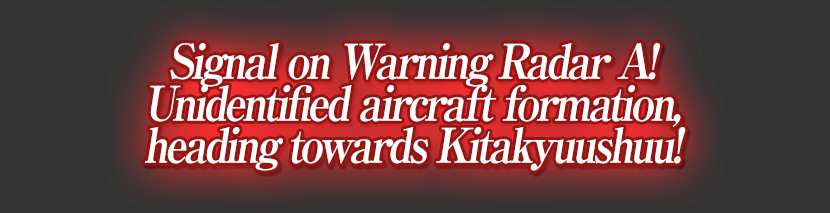
<style>
.page{position:relative;width:830px;height:213px;background:#333333}
.page>*{position:absolute;margin:0}
.t1{font:48px/42px "RyuminPro-ExBold";letter-spacing:-0.08em;color:#ffffff;font-style:italic;scale:0.9 1}
</style>
<div class="page">
<p class="t1" style="left:144px;top:43px;width:542px;height:128px;text-align:center">Signal on Warning Radar A!<br>Unidentified aircraft formation,<br>heading towards Kitakyuushuu!</p>
</div>
